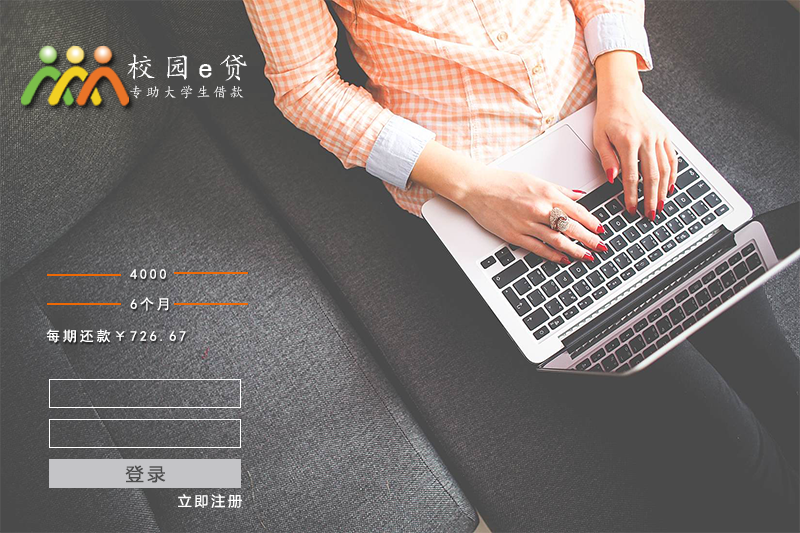
<style>
.page{position:relative;width:800px;height:533px}
.page>*{position:absolute;margin:0}
.t1{font:30px "¿¬Ìå";letter-spacing:0.2em;color:#ffffff}
.t2{font:14px "¿¬Ìå";letter-spacing:0.2em;color:#ffffff}
.t3{font:14px/30px "SimHei";letter-spacing:0.2em;color:#ffffff}
.t4{font:14px/30px "SimHei";letter-spacing:0.2em;color:#fcfdfc}
.t5{font:14px "SimHei";letter-spacing:0.2em;color:#ffffff}
.t6{font:18px "MicrosoftYaHei";letter-spacing:0.2em;color:#4c4c4c}
.t7{font:14px "MicrosoftYaHei";letter-spacing:0.2em;color:#ffffff}
</style>
<div class="page">
<p class="t1" style="left:127px;top:54px;width:120px;height:27px">校园e贷</p>
<p class="t2" style="left:130px;top:85px;width:114px;height:14px">专助大学生借款</p>
<p class="t3" style="left:130px;top:269px;width:39px;height:42px"><span class="t4">       </span>4000<br>       6个月</p>
<p class="t5" style="left:46px;top:329px;width:140px;height:14px">每期还款￥726.67</p>
<p class="t6" style="left:125px;top:465px;width:41px;height:18px">登录</p>
<p class="t7" style="left:178px;top:494px;width:64px;height:14px">立即注册</p>
</div>
